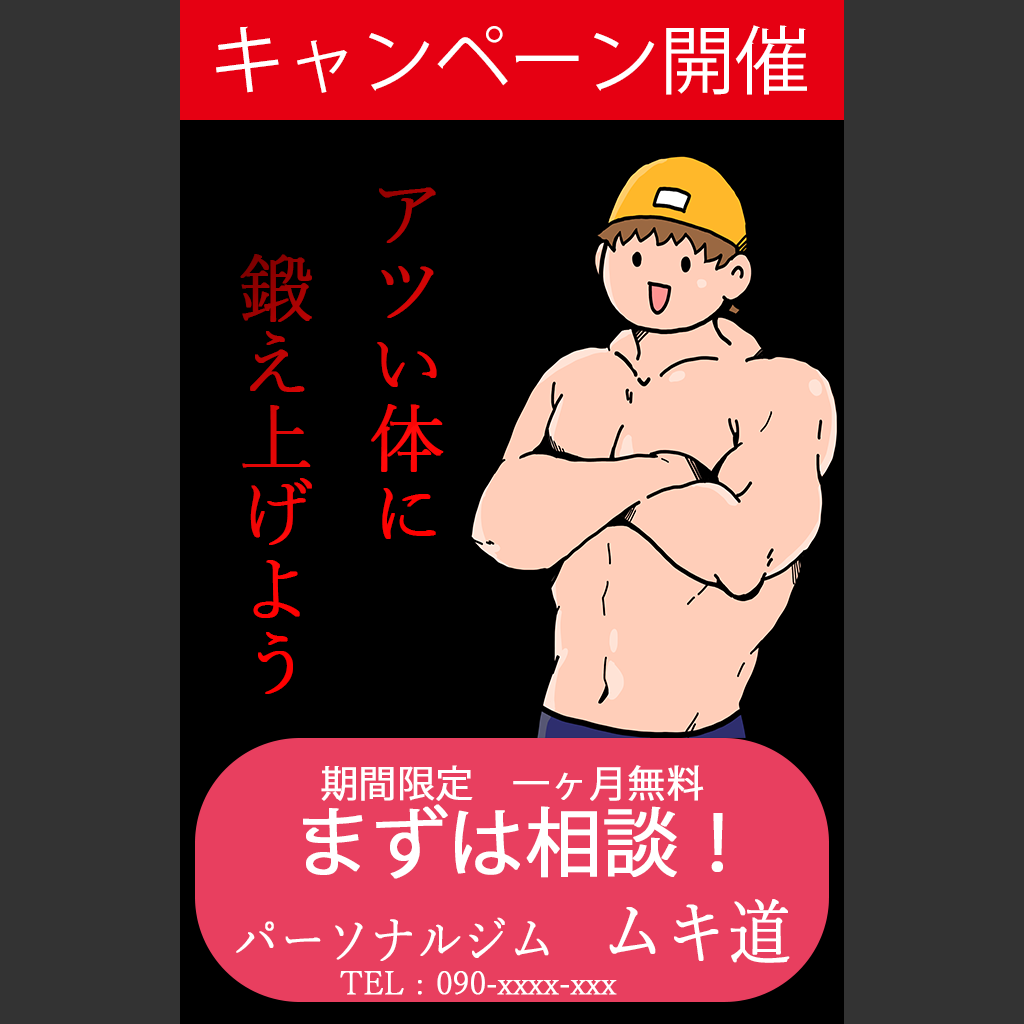
<style>
.page{position:relative;width:1024px;height:1024px;background:#333333}
.page>*{position:absolute;margin:0}
.t1{font:75px "KozGoPr6N-Regular";color:#ffffff}
.t2{font:75px "YuMincho-Light";font-weight:bold}
.t3{font:37.4px "KozGoPr6N-Regular";color:#ffffff;font-weight:bold}
.t4{font:75px "KozGoPr6N-Regular";color:#ffffff;font-weight:bold}
.t5{font:52.2px "YuMincho-Light";color:#ffffff;font-weight:bold;scale:0.86 1}
.t6{font:72px "YuMincho-Light";color:#ffffff;font-weight:bold;scale:0.86 1}
.t7{font:31.8px "YuMincho-Light";color:#ffffff;font-weight:bold}
</style>
<div class="page">
<p class="t1" style="left:216px;top:25px;width:591px;height:70px">キャンペーン開催</p>
<p class="t2" style="left:240px;top:187px;width:204px;height:507px">アツい体に<br>　鍛え上げよう</p>
<p class="t3" style="left:321px;top:765px;width:383px;height:36px">期間限定　一ヶ月無料</p>
<p class="t4" style="left:303px;top:804px;width:420px;height:75px">まずは相談！</p>
<p class="t5" style="left:236px;top:899px;width:554px;height:64px">パーソナルジム　<span class="t6">ムキ道</span></p>
<p class="t7" style="left:340px;top:971px;width:277px;height:24px">TEL : 090-xxxx-xxx</p>
</div>
